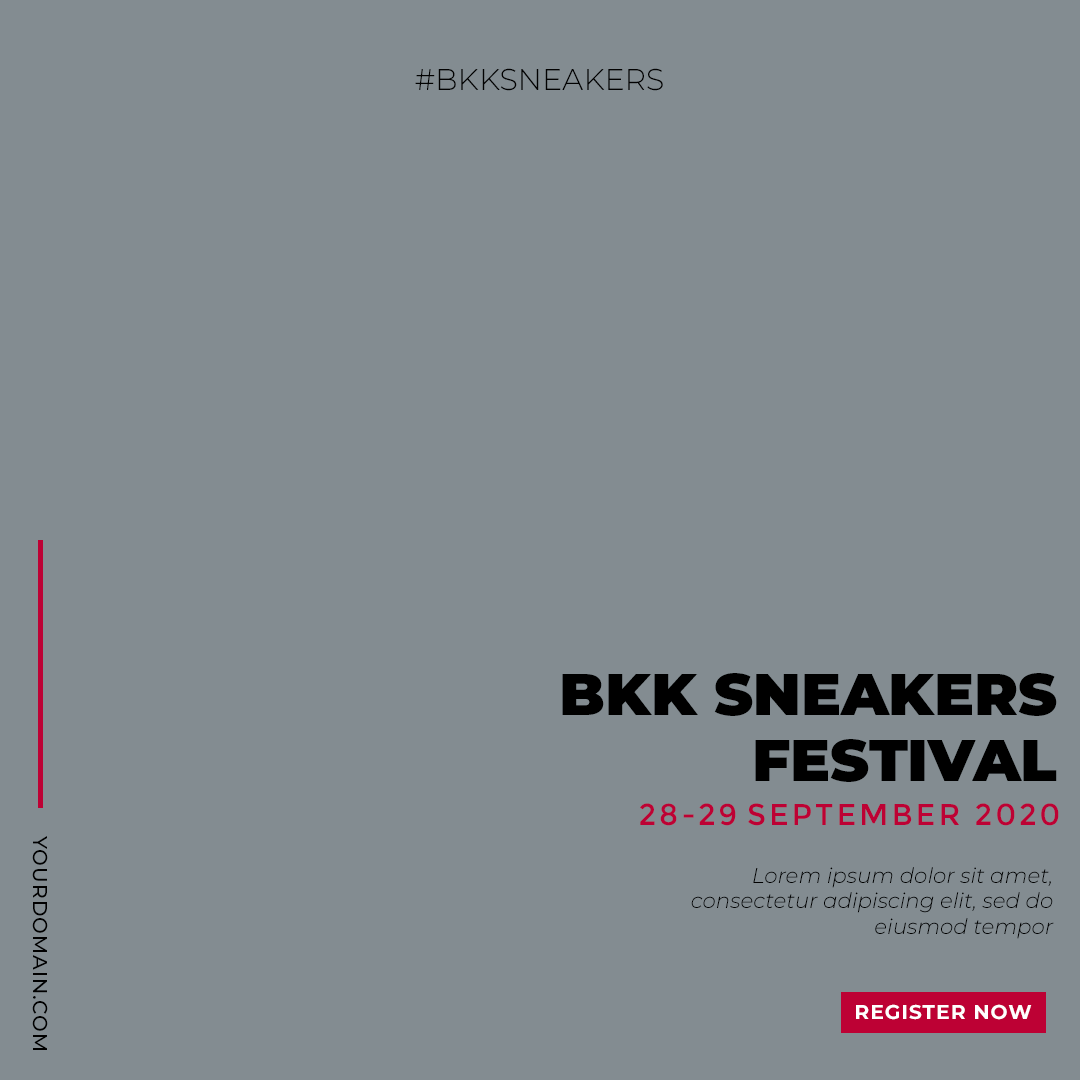
<style>
.page{position:relative;width:1080px;height:1080px;background:#838c91}
.page>*{position:absolute;margin:0}
.t1{font:30px "Montserrat-Light";color:#010101;text-transform:uppercase}
.t2{font:58.7px/66px "Montserrat-Black";color:#000000;text-transform:uppercase}
.t3{font:30.1px "Montserrat-Regular";letter-spacing:0.1em;color:#bd0134;text-transform:uppercase}
.t4{font:20px "Montserrat-Medium";letter-spacing:0.05em;color:#000000;text-transform:uppercase}
.t5{font:21.4px "Montserrat-LightItalic";color:#000000}
.t6{font:20.2px "Montserrat-Bold";letter-spacing:0.05em;color:#ffffff;text-transform:uppercase}
</style>
<div class="page">
<p class="t1" style="left:415px;top:68px;width:248px;height:23px">#BKKsneakers</p>
<p class="t2" style="left:562px;top:673px;width:495px;height:109px;text-align:right">BKK SNEAKERS<br>FESTIVAL</p>
<p class="t3" style="left:640px;top:803px;width:419px;height:23px">28-29 September 2020</p>
<p class="t4" style="left:32px;top:836px;width:16px;height:214px;rotate:90deg">Yourdomain.com</p>
<p class="t5" style="left:691px;top:867px;width:363px;height:72px;text-align:right">Lorem ipsum dolor sit amet, consectetur adipiscing elit, sed do eiusmod tempor</p>
<p class="t6" style="left:856px;top:1004px;width:176px;height:16px">Register Now</p>
</div>
